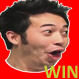
<style>
.page{position:relative;width:79px;height:79px;background:#ff0000}
.page>*{position:absolute;margin:0}
.t1{font:19.4px "Calibri-Bold";color:#c8cd36}
</style>
<div class="page">
<p class="t1" style="left:44px;top:65px;width:34px;height:13px">WIN</p>
</div>
